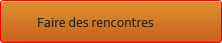
<style>
.page{position:relative;width:222px;height:43px}
.page>*{position:absolute;margin:0}
.t1{font:14px "Corbel";color:#282626}
</style>
<div class="page">
<p class="t1" style="left:38px;top:17px;width:116px;height:10px">Faire des rencontres</p>
</div>
